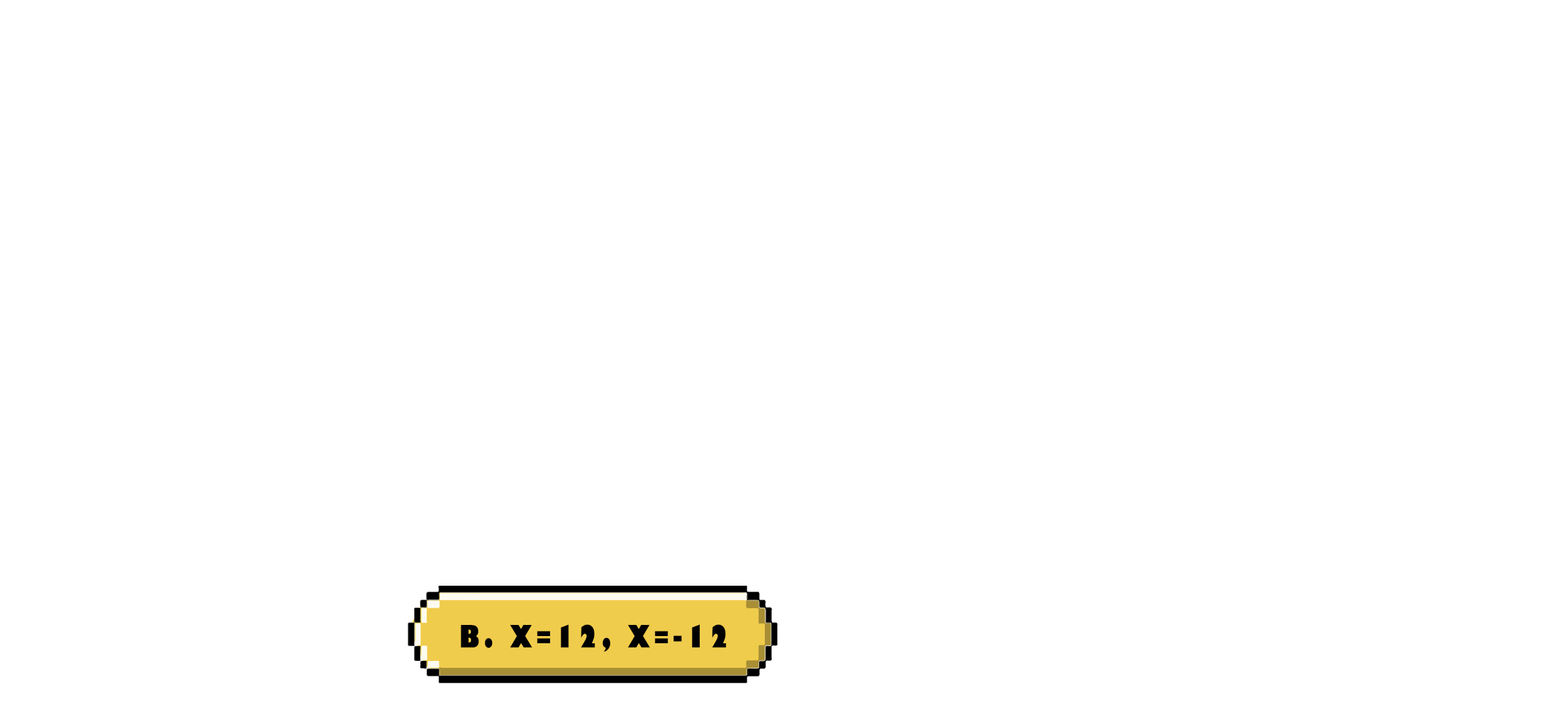
<style>
.page{position:relative;width:1568px;height:706px;background:#ffffff}
.page>*{position:absolute;margin:0}
.t1{font:29.9px "GillSans-UltraBoldCondensed";letter-spacing:0.115em;color:#000000;text-transform:uppercase;scale:1.12 1}
</style>
<div class="page">
<p class="t1" style="left:461px;top:624px;width:266px;height:27px">b. x=12, x=-12</p>
</div>
